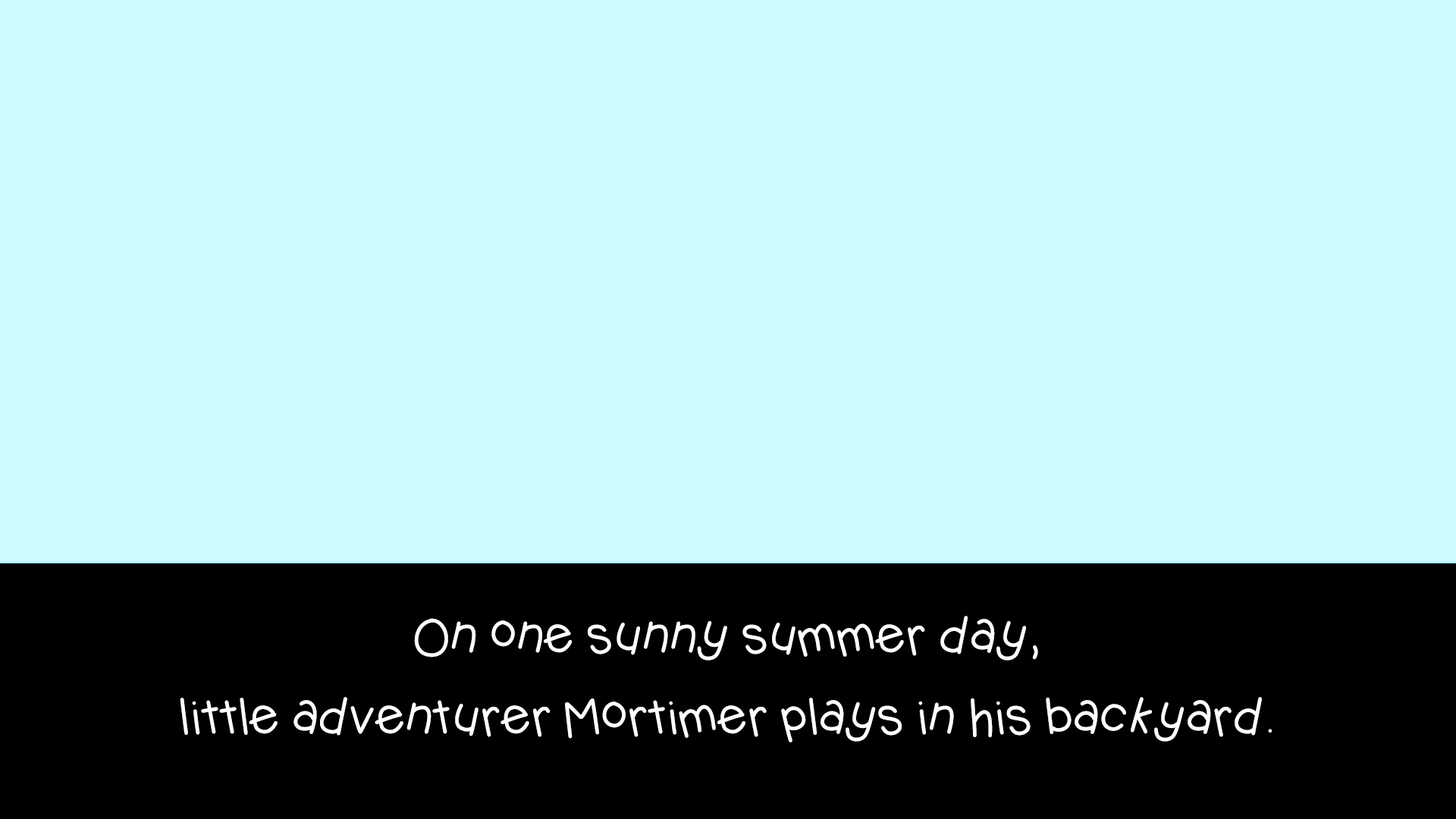
<style>
.page{position:relative;width:1456px;height:819px;background:#cbfaff}
.page>*{position:absolute;margin:0}
.t1{font:49.1px/81.1px "KBJellybean";letter-spacing:-0.04em;color:#ffffff}
</style>
<div class="page">
<p class="t1" style="left:180px;top:616px;width:1092px;height:126px;text-align:center">On one sunny summer day, <br>little adventurer Mortimer plays in his backyard.</p>
</div>
